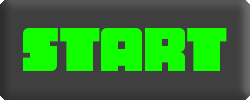
<style>
.page{position:relative;width:250px;height:100px;background:#3f3f3f}
.page>*{position:absolute;margin:0}
.t1{font:53.3px "Chuck";color:#12ff00}
</style>
<div class="page">
<p class="t1" style="left:23px;top:28px;width:204px;height:43px">START</p>
</div>
